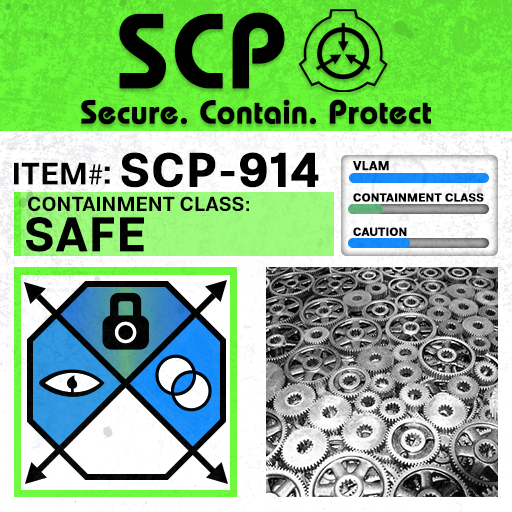
<style>
.page{position:relative;width:512px;height:512px}
.page>*{position:absolute;margin:0}
.t1{font:105.8px "BauhausLT-Demi";color:#000000;font-weight:bold}
.t2{font:33px "BauhausLT-Demi";color:#000000;font-weight:bold}
.t3{font:47.6px "Molde-Semibold";color:#000000;font-weight:bold}
.t4{font:12.5px "Molde-Semibold";color:#000000;font-weight:bold}
.t5{font:31.1px "Molde-Semibold";color:#000000}
.t6{font:31.1px "MyriadPro-Regular";color:#000000}
.t7{font:34.5px "Molde-Semibold";color:#000000}
.t8{font:20.3px "Molde-Semibold";color:#000000}
.t9{font:11.7px "Molde-Semibold";color:#000000;font-weight:bold}
.t10{font:47.8px "Molde-Semibold";color:#000000;font-weight:bold}
</style>
<div class="page">
<p class="t1" style="left:119px;top:12px;width:166px;height:77px">SCP</p>
<p class="t2" style="left:81px;top:99px;width:350px;height:26px">Secure. Contain. Protect</p>
<p class="t3" style="left:121px;top:152px;width:198px;height:36px">SCP-914</p>
<p class="t4" style="left:353px;top:161px;width:36px;height:10px">VLAM</p>
<p class="t5" style="left:14px;top:162px;width:89px;height:23px">ITEM<span class="t6">#</span></p>
<p class="t7" style="left:104px;top:166px;width:6px;height:18px">:</p>
<p class="t8" style="left:28px;top:196px;width:221px;height:16px">CONTAINMENT CLASS:</p>
<p class="t9" style="left:353px;top:193px;width:131px;height:9px">CONTAINMENT CLASS</p>
<p class="t10" style="left:26px;top:217px;width:118px;height:35px">SAFE</p>
<p class="t9" style="left:353px;top:227px;width:54px;height:9px">CAUTION</p>
</div>
